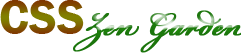
<style>
.page{position:relative;width:241px;height:53px;background:#ffffff}
.page>*{position:absolute;margin:0}
.t1{font:48px "FranklinGothic-Demi"}
.t2{font:48px "BickhamScriptPro-Regular";color:#1c7b0c;font-weight:bold}
</style>
<div class="page">
<p class="t1" style="left:0px;top:0px;width:84px;height:34px">CSS</p>
<p class="t2" style="left:73px;top:10px;width:168px;height:43px">Zen Garden</p>
</div>
